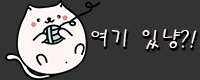
<style>
.page{position:relative;width:200px;height:80px;background:#333333}
.page>*{position:absolute;margin:0}
.t1{font:22.9px "PyunjiR-HM";color:#fff5f5}
</style>
<div class="page">
<p class="t1" style="left:91px;top:29px;width:106px;height:20px">여기 있냥?!</p>
</div>
